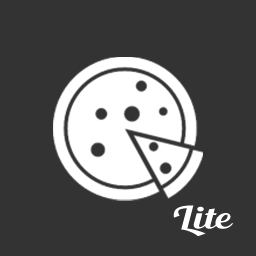
<style>
.page{position:relative;width:256px;height:256px;background:#333333}
.page>*{position:absolute;margin:0}
.t1{font:30.7px "BlendaScript";color:#ffffff;scale:1.33 1}
</style>
<div class="page">
<p class="t1" style="left:173px;top:205px;width:61px;height:32px">Lite</p>
</div>
